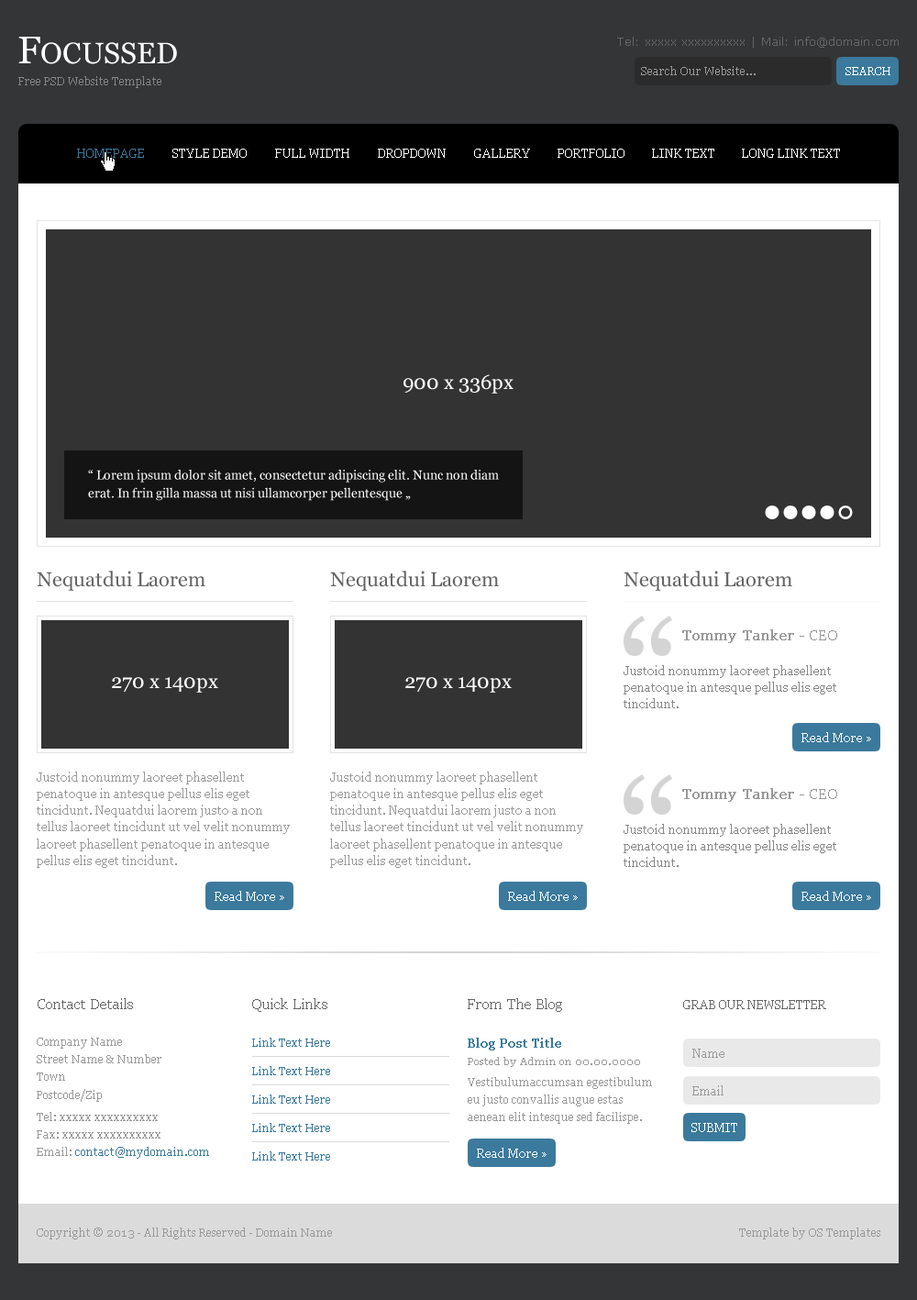
<style>
.page{position:relative;width:917px;height:1300px;background:#ffffff}
.page>*{position:absolute;margin:0}
.t1{font:29.4px "Georgia";color:#ffffff}
.t2{font:38.5px "Georgia";color:#ffffff}
.t3{font:11.9px "Verdana";color:#676767}
.t4{font:11px "Georgia";color:#858585}
.t5{font:11px "Georgia";color:#999999}
.t6{font:11px "Georgia";color:#ffffff}
.t7{font:11.9px "Georgia";color:#3b7a9d}
.t8{font:11.9px "Georgia";color:#ffffff}
.t9{font:20.2px "Georgia";color:#ffffff}
.t10{font:12.8px/18px "Georgia";color:#ffffff}
.t11{font:20.2px "Georgia";color:#666666}
.t12{font:14.7px "Georgia";color:#989898;font-weight:bold}
.t13{font:14.7px "Georgia";color:#989898}
.t14{font:11.9px/16.7px "Georgia";color:#878787}
.t15{font:11.9px/16.7px "Georgia";color:#999999}
.t16{font:14.7px "Georgia";color:#666666}
.t17{font:11.9px "Georgia";color:#666666}
.t18{font:11px/17.6px "Georgia";color:#999999}
.t19{font:11px/22px "Georgia";color:#999999}
.t20{font:11px/17.6px "Georgia";color:#3b7a9d}
.t21{font:11px "Georgia";color:#3b7a9d}
.t22{font:11.9px "Georgia";color:#3b7a9d;font-weight:bold}
.t23{font:11.9px "Georgia";color:#999999}
.t24{font:10.1px "Georgia";color:#999999}
</style>
<div class="page">
<p class="t1" style="left:18px;top:37px;width:159px;height:27px"><span class="t2">F</span>OCUSSED</p>
<p class="t3" style="left:617px;top:37px;width:282px;height:11px">Tel: xxxxx xxxxxxxxxx | Mail: info@domain.com</p>
<p class="t4" style="left:18px;top:76px;width:143px;height:12px">Free PSD Website Template</p>
<p class="t5" style="left:641px;top:66px;width:115px;height:9px">Search Our Website...</p>
<p class="t6" style="left:846px;top:67px;width:45px;height:8px">SEARCH</p>
<p class="t7" style="left:77px;top:149px;width:67px;height:9px">HOMEPAGE</p>
<p class="t8" style="left:172px;top:149px;width:75px;height:9px">STYLE DEMO</p>
<p class="t8" style="left:275px;top:149px;width:75px;height:9px">FULL WIDTH</p>
<p class="t8" style="left:378px;top:149px;width:68px;height:9px">DROPDOWN</p>
<p class="t8" style="left:474px;top:149px;width:56px;height:9px">GALLERY</p>
<p class="t8" style="left:558px;top:149px;width:67px;height:9px">PORTFOLIO</p>
<p class="t8" style="left:652px;top:149px;width:63px;height:9px">LINK TEXT</p>
<p class="t8" style="left:742px;top:149px;width:98px;height:9px">LONG LINK TEXT</p>
<p class="t9" style="left:404px;top:374px;width:110px;height:20px">900 x 336px</p>
<p class="t10" style="left:88px;top:470px;width:411px;height:31px">“ Lorem ipsum dolor sit amet, consectetur adipiscing elit. Nunc non diam erat. In frin gilla massa ut nisi ullamcorper pellentesque „</p>
<p class="t11" style="left:37px;top:571px;width:168px;height:20px">Nequatdui Laorem</p>
<p class="t11" style="left:330px;top:571px;width:169px;height:20px">Nequatdui Laorem</p>
<p class="t11" style="left:624px;top:571px;width:169px;height:20px">Nequatdui Laorem</p>
<p class="t12" style="left:683px;top:629px;width:155px;height:14px">Tommy Tanker<span class="t13"> - CEO</span></p>
<p class="t14" style="left:624px;top:665px;width:213px;height:43px">Justoid nonummy laoreet phasellent penatoque in antesque pellus elis eget tincidunt.</p>
<p class="t9" style="left:112px;top:677px;width:106px;height:16px">270 x 140px</p>
<p class="t9" style="left:405px;top:677px;width:107px;height:16px">270 x 140px</p>
<p class="t8" style="left:802px;top:732px;width:69px;height:10px">Read More »</p>
<p class="t15" style="left:37px;top:771px;width:253px;height:97px">Justoid nonummy laoreet phasellent penatoque in antesque pellus elis eget tincidunt. Nequatdui laorem justo a non tellus laoreet tincidunt ut vel velit nonummy laoreet phasellent penatoque in antesque pellus elis eget tincidunt.</p>
<p class="t15" style="left:330px;top:771px;width:253px;height:97px">Justoid nonummy laoreet phasellent penatoque in antesque pellus elis eget tincidunt. Nequatdui laorem justo a non tellus laoreet tincidunt ut vel velit nonummy laoreet phasellent penatoque in antesque pellus elis eget tincidunt.</p>
<p class="t12" style="left:683px;top:788px;width:155px;height:14px">Tommy Tanker<span class="t13"> - CEO</span></p>
<p class="t14" style="left:624px;top:824px;width:213px;height:43px">Justoid nonummy laoreet phasellent penatoque in antesque pellus elis eget tincidunt.</p>
<p class="t8" style="left:215px;top:891px;width:69px;height:10px">Read More »</p>
<p class="t8" style="left:508px;top:891px;width:70px;height:10px">Read More »</p>
<p class="t8" style="left:802px;top:891px;width:69px;height:10px">Read More »</p>
<p class="t16" style="left:38px;top:998px;width:95px;height:11px">Contact Details</p>
<p class="t16" style="left:252px;top:998px;width:75px;height:14px">Quick Links</p>
<p class="t16" style="left:468px;top:998px;width:94px;height:14px">From The Blog</p>
<p class="t17" style="left:683px;top:1000px;width:144px;height:9px">GRAB OUR NEWSLETTER</p>
<p class="t18" style="left:37px;top:1038px;width:172px;height:121px">Company Name<br>Street Name &amp; Number<br>Town<br>Postcode/Zip<span class="t19"><br>Tel: xxxxx xxxxxxxxxx<br></span>Fax: xxxxx xxxxxxxxxx<br>Email: <span class="t20">contact@mydomain.com</span></p>
<p class="t21" style="left:252px;top:1038px;width:78px;height:9px">Link Text Here</p>
<p class="t22" style="left:468px;top:1038px;width:93px;height:12px">Blog Post Title</p>
<p class="t23" style="left:693px;top:1049px;width:32px;height:9px">Name</p>
<p class="t24" style="left:468px;top:1057px;width:172px;height:10px">Posted by Admin on 00.00.0000</p>
<p class="t21" style="left:252px;top:1066px;width:78px;height:9px">Link Text Here</p>
<p class="t18" style="left:468px;top:1077px;width:184px;height:47px">Vestibulumaccumsan egestibulum eu justo convallis augue estas aenean elit intesque sed facilispe.</p>
<p class="t23" style="left:693px;top:1085px;width:31px;height:10px">Email</p>
<p class="t21" style="left:252px;top:1094px;width:78px;height:10px">Link Text Here</p>
<p class="t21" style="left:252px;top:1123px;width:78px;height:9px">Link Text Here</p>
<p class="t8" style="left:692px;top:1123px;width:46px;height:9px">SUBMIT</p>
<p class="t21" style="left:252px;top:1151px;width:78px;height:9px">Link Text Here</p>
<p class="t8" style="left:477px;top:1148px;width:70px;height:10px">Read More »</p>
<p class="t5" style="left:37px;top:1227px;width:295px;height:12px">Copyright © 2013 - All Rights Reserved - Domain Name</p>
<p class="t5" style="left:739px;top:1227px;width:142px;height:12px">Template by OS Templates</p>
</div>
